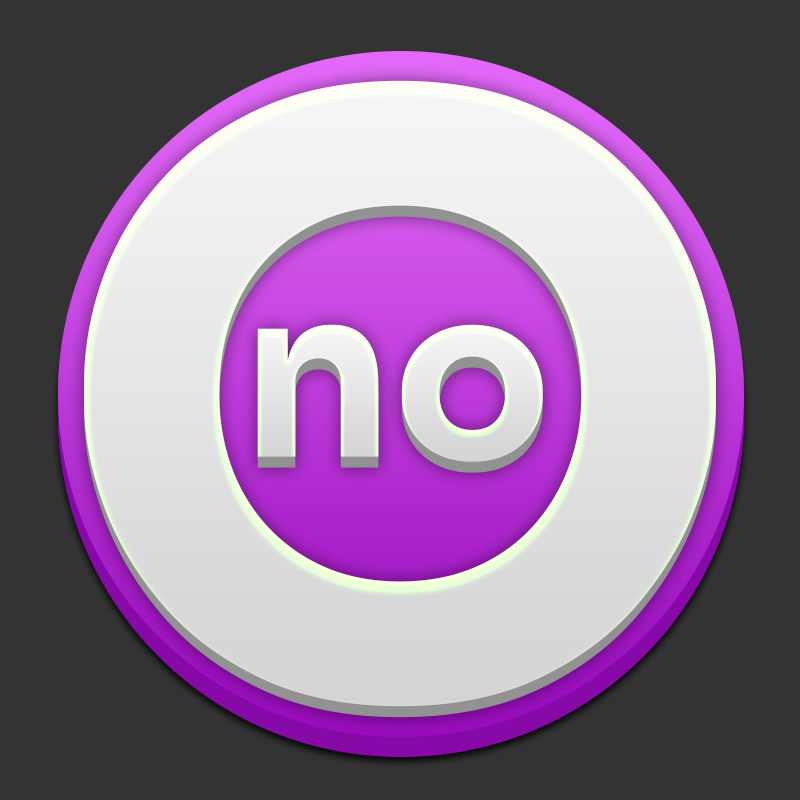
<style>
.page{position:relative;width:800px;height:800px;background:#333333}
.page>*{position:absolute;margin:0}
.t1{font:810.1px "Sora-Bold";color:#e6e7e5}
.t2{font:233.2px "Sora-Bold";color:#e9ebe6}
</style>
<div class="page">
<p class="t1" style="left:84px;top:80px;width:632px;height:627px">O</p>
<p class="t2" style="left:257px;top:324px;width:286px;height:138px">no</p>
</div>
